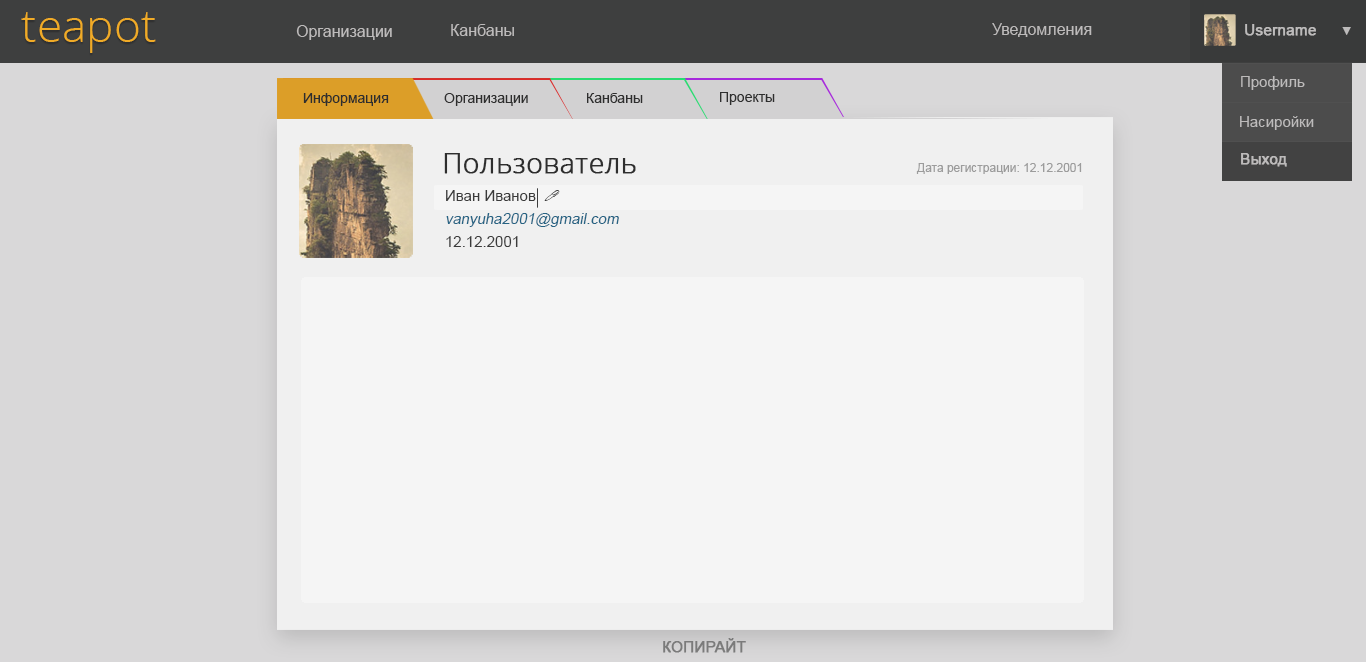
<style>
.page{position:relative;width:1366px;height:662px;background:#d9d8d9}
.page>*{position:absolute;margin:0}
.t1{font:46px "OpenSans-Light";color:#f0ab27}
.t2{font:16px "ArialMT";color:#bdbbbb}
.t3{font:15px "ArialMT";color:#bdbbbb;font-weight:bold}
.t4{font:12.3px "ArialMT";color:#bdbbbb}
.t5{font:15px "ArialMT";color:#bdbbbb}
.t6{font:14px "ArialMT";color:#2e2e2e}
.t7{font:28px "OpenSans-Light";color:#2e2e2e;font-weight:bold}
.t8{font:12px "ArialMT";color:#9c9c9c}
.t9{font:15px "ArialMT";color:#3b3b3b}
.t10{font:15px "Wingdings2";color:#3b3b3b}
.t11{font:15px "ArialMT";color:#266383;font-style:italic}
.t12{font:15px "ArialMT";color:#7b7a7a;font-weight:bold}
</style>
<div class="page">
<p class="t1" style="left:21px;top:12px;width:135px;height:41px">teapot</p>
<p class="t2" style="left:296px;top:25px;width:96px;height:15px">Организации</p>
<p class="t2" style="left:451px;top:24px;width:63px;height:12px">Канбаны</p>
<p class="t2" style="left:992px;top:23px;width:100px;height:14px">Уведомления</p>
<p class="t3" style="left:1245px;top:24px;width:71px;height:12px">Username</p>
<p class="t4" style="left:1342px;top:27px;width:9px;height:8px">▼</p>
<p class="t5" style="left:1241px;top:76px;width:64px;height:14px">Профиль</p>
<p class="t6" style="left:303px;top:93px;width:86px;height:13px">Информация</p>
<p class="t6" style="left:444px;top:93px;width:84px;height:13px">Организации</p>
<p class="t6" style="left:587px;top:93px;width:56px;height:10px">Канбаны</p>
<p class="t6" style="left:720px;top:92px;width:55px;height:13px">Проекты</p>
<p class="t5" style="left:1240px;top:116px;width:74px;height:14px">Насиройки</p>
<p class="t7" style="left:444px;top:153px;width:192px;height:21px">Пользователь</p>
<p class="t3" style="left:1241px;top:153px;width:46px;height:14px">Выход</p>
<p class="t8" style="left:916px;top:163px;width:166px;height:11px">Дата регистрации: 12.12.2001</p>
<p class="t9" style="left:446px;top:190px;width:114px;height:11px">Иван Иванов  <span class="t10">!</span></p>
<p class="t11" style="left:446px;top:213px;width:173px;height:14px">vanyuha2001@gmail.com</p>
<p class="t9" style="left:446px;top:236px;width:72px;height:11px">12.12.2001</p>
<p class="t12" style="left:663px;top:638px;width:83px;height:15px">КОПИРАЙТ</p>
</div>
